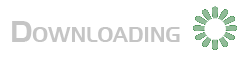
<style>
.page{position:relative;width:250px;height:57px;background:#ffffff}
.page>*{position:absolute;margin:0}
.t1{font:21px "Slicker";color:#c5c5c5}
.t2{font:30px "Slicker";color:#c5c5c5}
</style>
<div class="page">
<p class="t1" style="left:12px;top:21px;width:168px;height:21px"><span class="t2">D</span>OWNLOADING</p>
</div>
